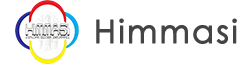
<style>
.page{position:relative;width:250px;height:64px;background:#ffffff}
.page>*{position:absolute;margin:0}
.t1{font:32px "CenturyGothic";letter-spacing:0.05em;color:#444444;font-weight:bold}
</style>
<div class="page">
<p class="t1" style="left:96px;top:18px;width:141px;height:26px">Himmasi</p>
</div>
